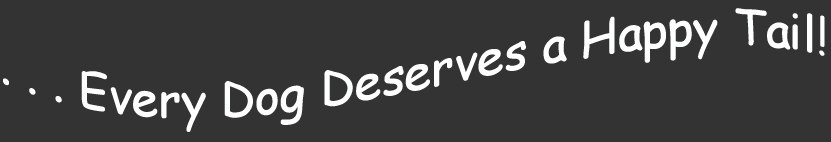
<style>
.page{position:relative;width:831px;height:142px;background:#333333}
.page>*{position:absolute;margin:0}
.t1{font:48px "ComicSansMS";color:#feffff}
</style>
<div class="page">
<p class="t1" style="left:3px;top:8px;width:822px;height:124px">. . . Every Dog Deserves a Happy Tail!</p>
</div>
